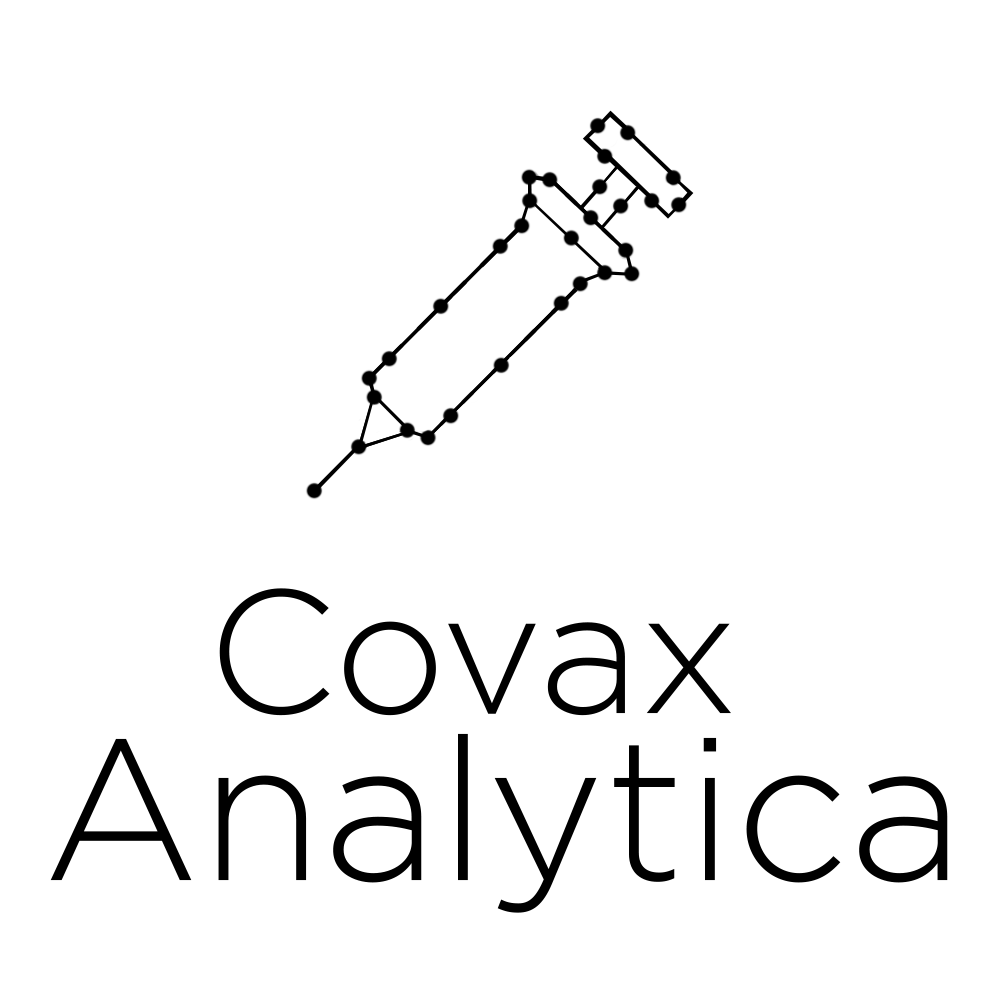
<style>
.page{position:relative;width:1000px;height:1000px;background:#ffffff}
.page>*{position:absolute;margin:0}
.t1{font:200px/166.7px "Gotham-Light";color:#000000}
.t2{font:175px/166.7px "Gotham-Light";color:#000000}
</style>
<div class="page">
<p class="t1" style="left:50px;top:588px;width:898px;height:325px;text-align:center"><span class="t2">Covax</span> <br>Analytica</p>
</div>
